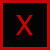
<style>
.page{position:relative;width:50px;height:50px;background:#040404}
.page>*{position:absolute;margin:0}
.t1{font:27.6px "LucidaGrande";color:#c70505}
</style>
<div class="page">
<p class="t1" style="left:16px;top:15px;width:17px;height:20px">X</p>
</div>
